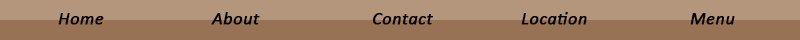
<style>
.page{position:relative;width:800px;height:40px;background:#987254}
.page>*{position:absolute;margin:0}
.t1{font:18px "Calibri-Italic";letter-spacing:0.01em;color:#000000;font-weight:bold}
</style>
<div class="page">
<p class="t1" style="left:58px;top:13px;width:46px;height:12px">Home</p>
<p class="t1" style="left:211px;top:12px;width:49px;height:13px">About</p>
<p class="t1" style="left:372px;top:13px;width:62px;height:12px">Contact</p>
<p class="t1" style="left:521px;top:12px;width:66px;height:13px">Location</p>
<p class="t1" style="left:690px;top:13px;width:45px;height:12px">Menu</p>
</div>
